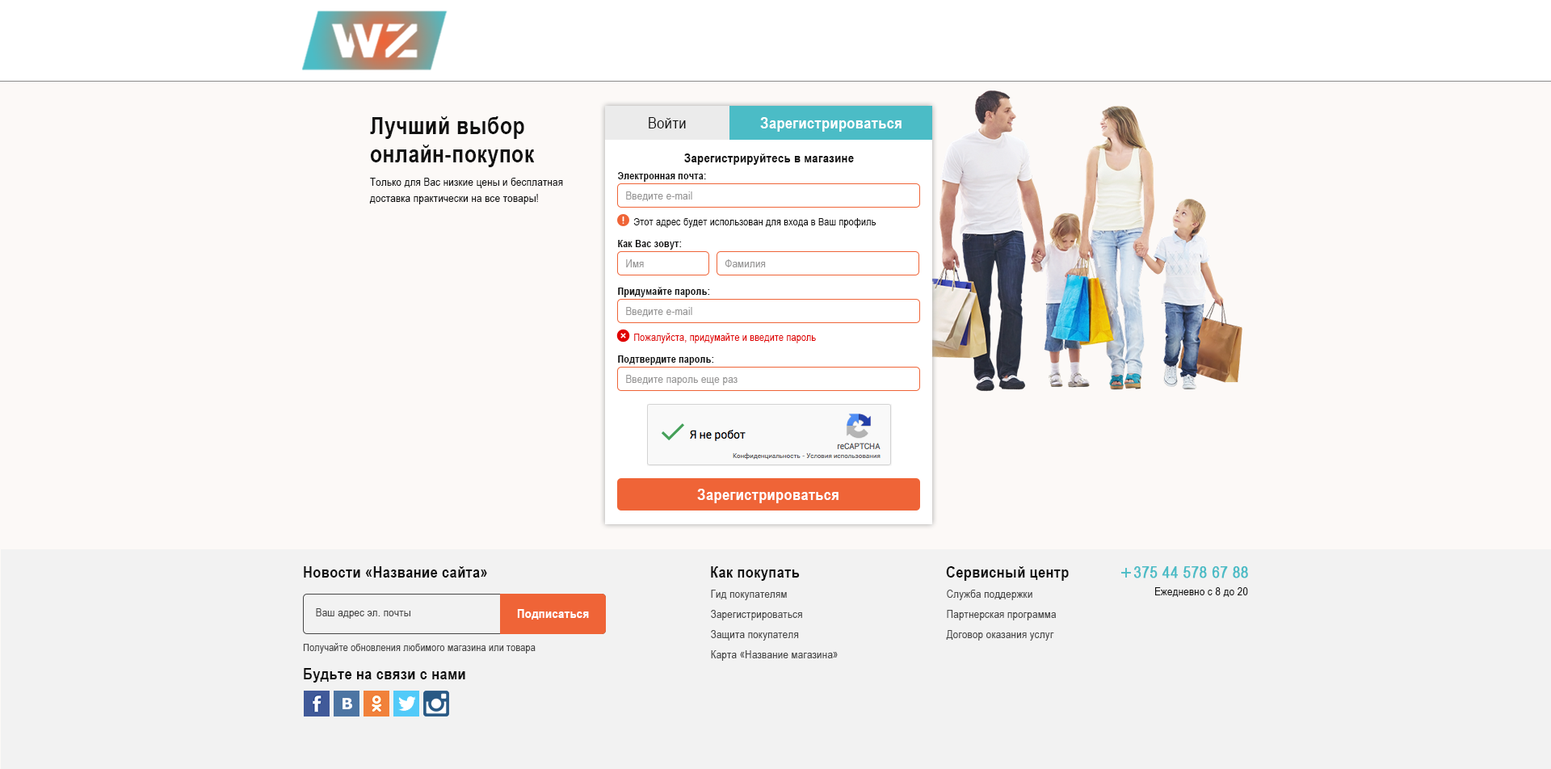
<style>
.page{position:relative;width:1551px;height:769px;background:#fcf9f7}
.page>*{position:absolute;margin:0}
.t1{font:24.2px/28.3px "ArialNarrow-Bold";letter-spacing:0.02em;color:#111111}
.t2{font:16.2px "ArialNarrow";letter-spacing:0.02em;color:#111111}
.t3{font:16.2px "ArialNarrow-Bold";letter-spacing:0.02em;color:#ffffff}
.t4{font:12.9px "ArialNarrow-Bold";letter-spacing:0.02em;color:#111111}
.t5{font:10.5px "ArialNarrow-Bold";letter-spacing:0.02em;color:#111111}
.t6{font:11.3px/16.2px "ArialNarrow";letter-spacing:0.02em;color:#111111}
.t7{font:11.3px "ArialNarrow";letter-spacing:0.02em;color:#989797}
.t8{font:10.5px "ArialNarrow";letter-spacing:0.02em;color:#111111}
.t9{font:10.5px "ArialNarrow";letter-spacing:0.02em;color:#e00000}
.t10{font:16.2px "ArialNarrow-Bold";letter-spacing:0.02em;color:#111111}
.t11{font:16.2px "ArialNarrow";letter-spacing:0.02em;color:#4bbcc6;font-weight:bold}
.t12{font:11.3px "ArialNarrow";letter-spacing:0.02em;color:#464646}
.t13{font:11.3px "ArialNarrow";letter-spacing:0.02em;color:#111111}
.t14{font:12.9px "ArialNarrow-Bold";letter-spacing:0.02em;color:#ffffff}
.t15{font:10.5px "ArialNarrow";letter-spacing:0.02em;color:#464646}
</style>
<div class="page">
<p class="t1" style="left:370px;top:116px;width:165px;height:51px">Лучший выбор<br>онлайн-покупок</p>
<p class="t2" style="left:649px;top:117px;width:37px;height:11px">Войти</p>
<p class="t3" style="left:760px;top:117px;width:141px;height:15px">Зарегистрироваться</p>
<p class="t4" style="left:684px;top:153px;width:170px;height:12px">Зарегистрируйтесь в магазине</p>
<p class="t5" style="left:618px;top:172px;width:88px;height:10px">Электронная почта:</p>
<p class="t6" style="left:369px;top:178px;width:194px;height:26px">Только для Вас низкие цены и бесплатная<br>  доставка практически на все товары!</p>
<p class="t7" style="left:626px;top:191px;width:66px;height:10px">Введите e-mail</p>
<p class="t8" style="left:633px;top:218px;width:243px;height:10px">Этот адрес будет использован для входа в Ваш профиль</p>
<p class="t5" style="left:618px;top:240px;width:64px;height:10px">Как Вас зовут:</p>
<p class="t7" style="left:626px;top:259px;width:18px;height:8px">Имя</p>
<p class="t7" style="left:725px;top:259px;width:41px;height:8px">Фамилия</p>
<p class="t5" style="left:618px;top:287px;width:92px;height:10px">Придумайте пароль:</p>
<p class="t7" style="left:626px;top:307px;width:66px;height:10px">Введите e-mail</p>
<p class="t9" style="left:634px;top:333px;width:182px;height:10px">Пожалуйста, придумайте и введите пароль</p>
<p class="t5" style="left:618px;top:355px;width:96px;height:10px">Подтвердите пароль:</p>
<p class="t7" style="left:626px;top:375px;width:111px;height:10px">Введите пароль еще раз</p>
<p class="t3" style="left:697px;top:489px;width:141px;height:14px">Зарегистрироваться</p>
<p class="t10" style="left:304px;top:566px;width:183px;height:12px">Новости «Название сайта»</p>
<p class="t10" style="left:711px;top:566px;width:89px;height:15px">Как покупать</p>
<p class="t10" style="left:946px;top:566px;width:123px;height:15px">Сервисный центр</p>
<p class="t11" style="left:1133px;top:566px;width:115px;height:12px">375 44 578 67 88</p>
<p class="t12" style="left:711px;top:590px;width:76px;height:10px">Гид покупателям</p>
<p class="t12" style="left:947px;top:590px;width:85px;height:10px">Служба поддержки</p>
<p class="t13" style="left:1155px;top:587px;width:93px;height:10px">Ежедневно с 8 до 20</p>
<p class="t12" style="left:316px;top:608px;width:94px;height:11px">Ваш адрес эл. почты</p>
<p class="t14" style="left:517px;top:609px;width:72px;height:11px">Подписаться</p>
<p class="t12" style="left:711px;top:610px;width:91px;height:10px">Зарегистрироваться</p>
<p class="t12" style="left:947px;top:610px;width:109px;height:10px">Партнерская программа</p>
<p class="t12" style="left:711px;top:630px;width:88px;height:11px">Защита покупателя</p>
<p class="t12" style="left:946px;top:630px;width:108px;height:11px">Договор оказания услуг</p>
<p class="t15" style="left:303px;top:643px;width:233px;height:10px">Получайте обновления любимого магазина или товара</p>
<p class="t12" style="left:711px;top:650px;width:127px;height:11px">Карта «Название магазина»</p>
<p class="t10" style="left:304px;top:668px;width:161px;height:15px">Будьте на связи с нами</p>
</div>
